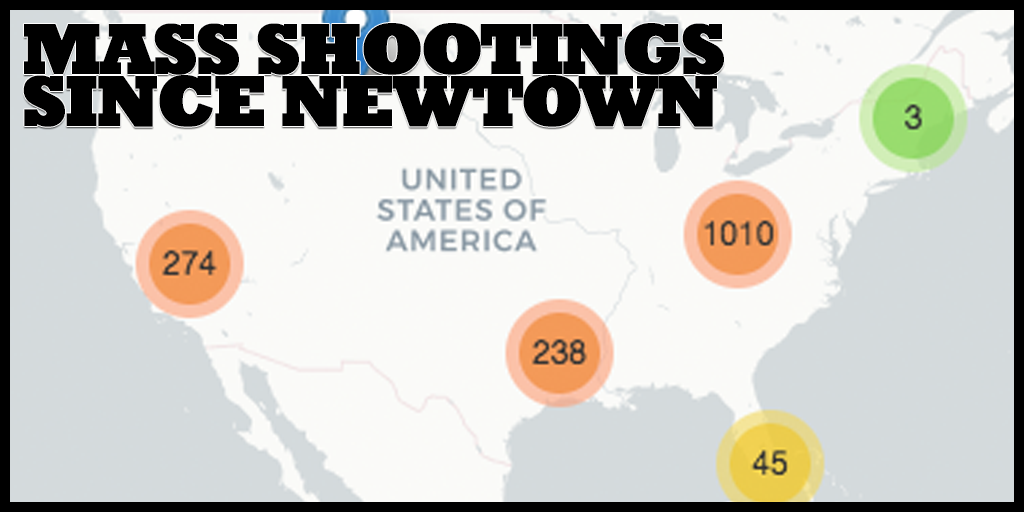
<style>
.page{position:relative;width:1024px;height:512px;background:#fafaf8}
.page>*{position:absolute;margin:0}
.t1{font:72px "Rockwell-ExtraBold";letter-spacing:-0.05em;color:#000000;font-weight:bold}
</style>
<div class="page">
<p class="t1" style="left:23px;top:23px;width:701px;height:104px">MASS SHOOTINGS SINCE NEWTOWN</p>
</div>
